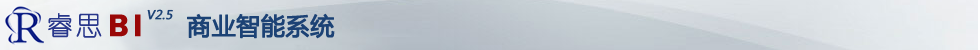
<style>
.page{position:relative;width:980px;height:50px}
.page>*{position:absolute;margin:0}
.t1{font:12px "MicrosoftYaHei";color:#1c4275;font-weight:bold;font-style:italic}
.t2{font:24px "MicrosoftYaHei";color:#1c4275;font-weight:bold}
</style>
<div class="page">
<p class="t1" style="left:147px;top:9px;width:26px;height:11px">V2.5</p>
<p class="t2" style="left:187px;top:13px;width:148px;height:26px">商业智能系统</p>
</div>
